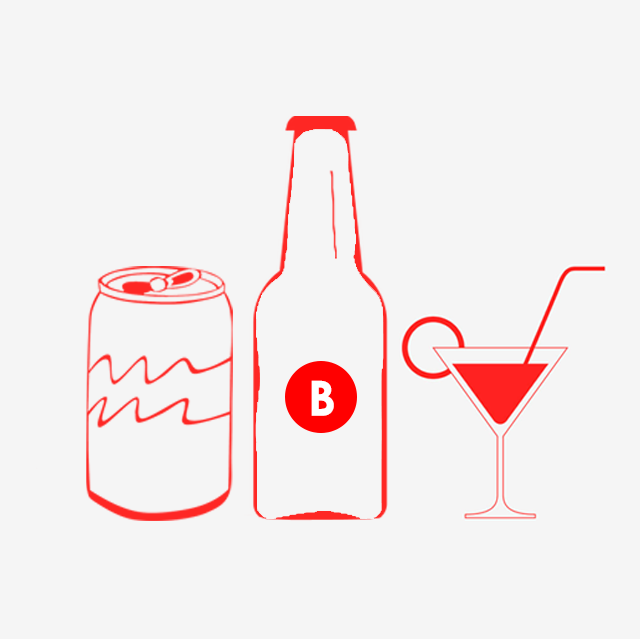
<style>
.page{position:relative;width:640px;height:639px;background:#f5f5f5}
.page>*{position:absolute;margin:0}
.t1{font:48px "CenturyGothic-Bold";letter-spacing:0.02em;color:#ffffff;text-transform:uppercase;font-weight:bold}
</style>
<div class="page">
<p class="t1" style="left:311px;top:380px;width:23px;height:36px">B</p>
</div>
